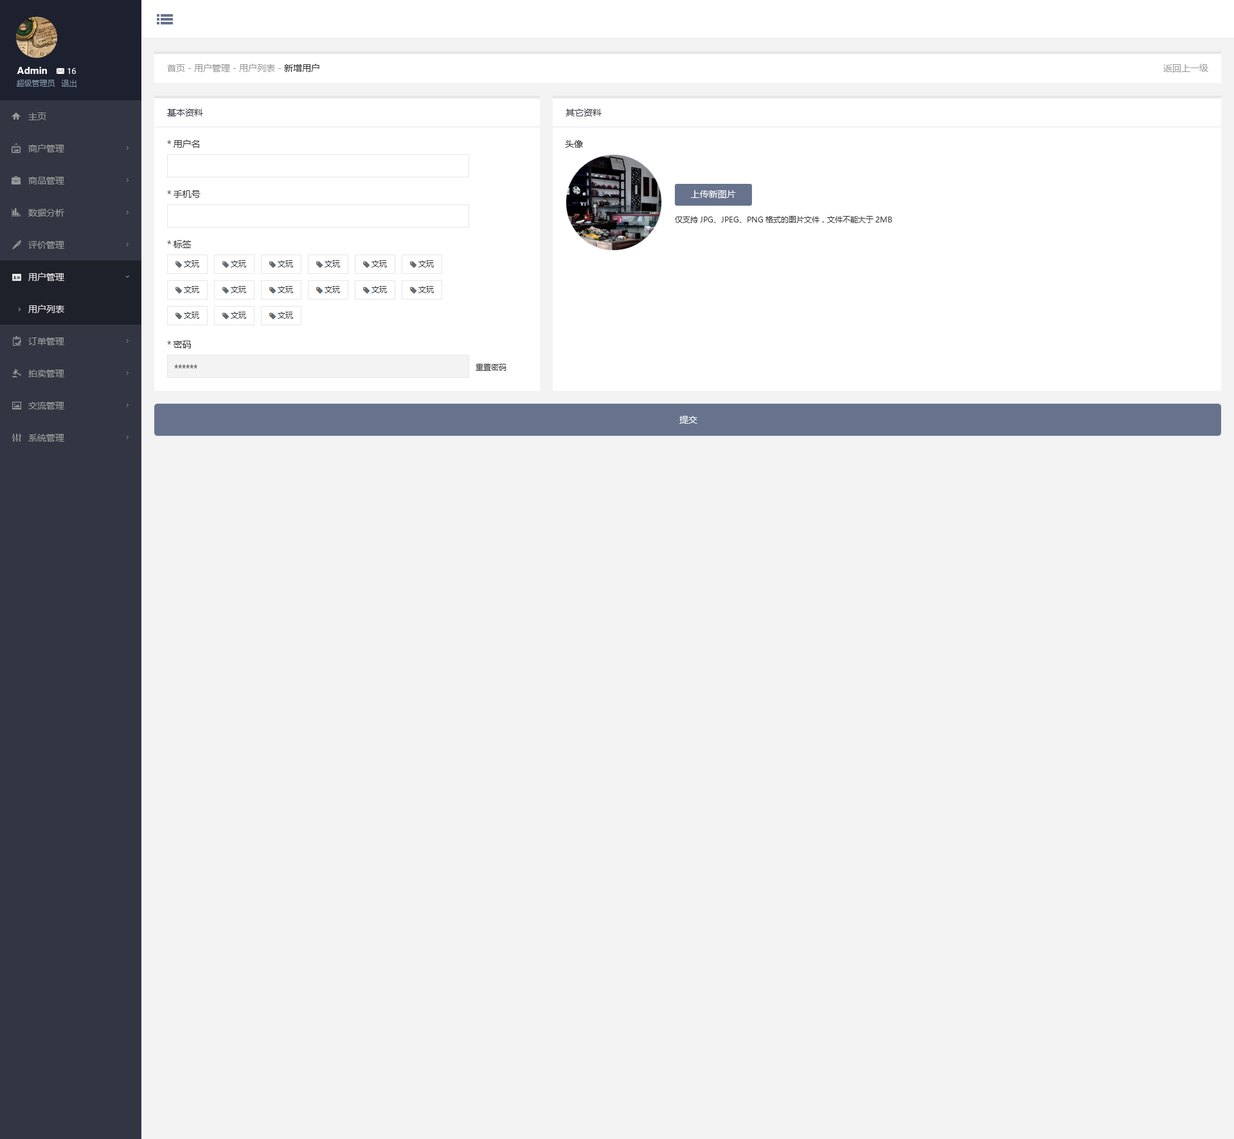
<style>
.page{position:relative;width:1234px;height:1139px;background:#f3f3f4}
.page>*{position:absolute;margin:0}
.t1{font:9px "MicrosoftYaHei";color:#999999}
.t2{font:9px "MicrosoftYaHei";color:#333333}
.t3{font:9px "MicrosoftYaHei-Bold";color:#ffffff}
.t4{font:7.7px "MicrosoftYaHei";color:#ffffff}
.t5{font:7.7px "MicrosoftYaHei";color:#8095a8}
.t6{font:9px/32.1px "MicrosoftYaHei";color:#999999}
.t7{font:9px/32.1px "MicrosoftYaHei";color:#e6e6e6}
.t8{font:9px "MicrosoftYaHei";color:#333642}
.t9{font:9px/50.1px "MicrosoftYaHei";color:#333333}
.t10{font:9px "MicrosoftYaHei";color:#ffffff}
.t11{font:7.7px "MicrosoftYaHei";color:#333333}
.t12{font:9px "MicrosoftYaHei";color:#e6e6e6}
</style>
<div class="page">
<p class="t1" style="left:167px;top:64px;width:153px;height:8px">首页 - 用户管理 - 用户列表 - <span class="t2">新增用户</span></p>
<p class="t1" style="left:1164px;top:64px;width:45px;height:9px">返回上一级</p>
<p class="t3" style="left:17px;top:67px;width:30px;height:7px">Admin</p>
<p class="t4" style="left:68px;top:68px;width:8px;height:6px">16</p>
<p class="t5" style="left:17px;top:80px;width:38px;height:7px">超级管理员</p>
<p class="t5" style="left:61px;top:80px;width:15px;height:7px">退出</p>
<p class="t6" style="left:28px;top:113px;width:36px;height:329px">主页<br>商户管理<br>商品管理<br>数据分析<br>评价管理<br><span class="t7">用户管理<br></span><br>订单管理<br>拍卖管理<br>交流管理<br>系统管理</p>
<p class="t8" style="left:167px;top:109px;width:36px;height:7px">基本资料</p>
<p class="t8" style="left:566px;top:109px;width:36px;height:7px">其它资料</p>
<p class="t9" style="left:167px;top:140px;width:34px;height:208px">*用户名<br>*手机号<br>*标签<br><br>*密码</p>
<p class="t2" style="left:565px;top:140px;width:18px;height:8px">头像</p>
<p class="t10" style="left:691px;top:190px;width:45px;height:9px">上传新图片</p>
<p class="t11" style="left:675px;top:216px;width:217px;height:7px">仅支持JPG、JPEG、PNG格式的图片文件，文件不能大于2MB</p>
<p class="t11" style="left:184px;top:260px;width:15px;height:7px">文玩</p>
<p class="t12" style="left:28px;top:305px;width:36px;height:8px">用户列表</p>
<p class="t2" style="left:174px;top:364px;width:23px;height:4px">******</p>
<p class="t11" style="left:476px;top:364px;width:31px;height:7px">重置密码</p>
<p class="t10" style="left:680px;top:416px;width:18px;height:8px">提交</p>
</div>
